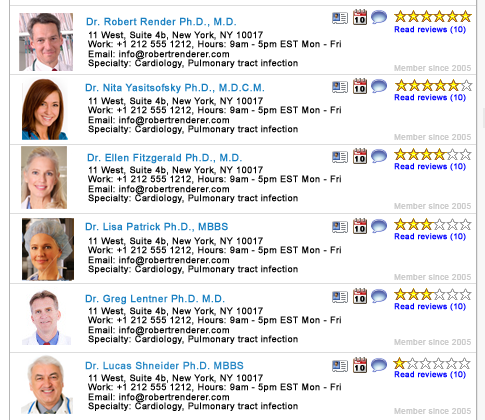
<style>
.page{position:relative;width:485px;height:420px;background:#ffffff}
.page>*{position:absolute;margin:0}
.t1{font:10px "ArialMT";letter-spacing:0.025em;color:#1b81c2;font-weight:bold}
.t2{font:8px "ArialMT";letter-spacing:0.025em;color:#0000ff;font-weight:bold}
.t3{font:9px/9.3px "ArialMT";letter-spacing:0.025em;color:#000000;font-weight:bold}
.t4{font:8px "ArialMT";letter-spacing:0.025em;color:#cccccc;font-weight:bold}
.t5{font:10px "ArialMT";letter-spacing:0.025em;color:#2a89c6;font-weight:bold}
</style>
<div class="page">
<p class="t1" style="left:86px;top:17px;width:150px;height:10px">Dr. Robert Render Ph.D., M.D.</p>
<p class="t2" style="left:394px;top:26px;width:72px;height:8px">Read reviews (10)</p>
<p class="t3" style="left:88px;top:31px;width:253px;height:37px">11 West, Suite 4b, New York, NY 10017<br>Work: +1 212 555 1212, Hours: 9am - 5pm EST Mon - Fri<br>Email: info@robertrenderer.com<br>Specialty: Cardiology, Pulmonary tract infection</p>
<p class="t4" style="left:394px;top:65px;width:77px;height:6px">Member since 2005</p>
<p class="t1" style="left:85px;top:83px;width:179px;height:11px">Dr. Nita Yasitsofsky Ph.D., M.D.C.M.</p>
<p class="t3" style="left:88px;top:97px;width:253px;height:37px">11 West, Suite 4b, New York, NY 10017<br>Work: +1 212 555 1212, Hours: 9am - 5pm EST Mon - Fri<br>Email: info@robertrenderer.com<br>Specialty: Cardiology, Pulmonary tract infection</p>
<p class="t2" style="left:394px;top:94px;width:72px;height:8px">Read reviews (10)</p>
<p class="t4" style="left:394px;top:134px;width:77px;height:6px">Member since 2005</p>
<p class="t1" style="left:87px;top:153px;width:155px;height:11px">Dr. Ellen Fitzgerald Ph.D., M.D.</p>
<p class="t3" style="left:88px;top:166px;width:253px;height:37px">11 West, Suite 4b, New York, NY 10017<br>Work: +1 212 555 1212, Hours: 9am - 5pm EST Mon - Fri<br>Email: info@robertrenderer.com<br>Specialty: Cardiology, Pulmonary tract infection</p>
<p class="t2" style="left:394px;top:163px;width:72px;height:8px">Read reviews (10)</p>
<p class="t4" style="left:394px;top:203px;width:77px;height:6px">Member since 2005</p>
<p class="t1" style="left:85px;top:222px;width:143px;height:10px">Dr. Lisa Patrick Ph.D., MBBS</p>
<p class="t2" style="left:394px;top:233px;width:72px;height:8px">Read reviews (10)</p>
<p class="t3" style="left:88px;top:237px;width:253px;height:37px">11 West, Suite 4b, New York, NY 10017<br>Work: +1 212 555 1212, Hours: 9am - 5pm EST Mon - Fri<br>Email: info@robertrenderer.com<br>Specialty: Cardiology, Pulmonary tract infection</p>
<p class="t4" style="left:394px;top:274px;width:77px;height:6px">Member since 2005</p>
<p class="t1" style="left:85px;top:294px;width:140px;height:11px">Dr. Greg Lentner Ph.D. M.D.</p>
<p class="t2" style="left:394px;top:303px;width:72px;height:8px">Read reviews (10)</p>
<p class="t3" style="left:88px;top:307px;width:253px;height:37px">11 West, Suite 4b, New York, NY 10017<br>Work: +1 212 555 1212, Hours: 9am - 5pm EST Mon - Fri<br>Email: info@robertrenderer.com<br>Specialty: Cardiology, Pulmonary tract infection</p>
<p class="t4" style="left:394px;top:339px;width:77px;height:6px">Member since 2005</p>
<p class="t5" style="left:85px;top:361px;width:159px;height:9px">Dr. Lucas Shneider Ph.D. MBBS</p>
<p class="t3" style="left:88px;top:374px;width:253px;height:37px">11 West, Suite 4b, New York, NY 10017<br>Work: +1 212 555 1212, Hours: 9am - 5pm EST Mon - Fri<br>Email: info@robertrenderer.com<br>Specialty: Cardiology, Pulmonary tract infection</p>
<p class="t2" style="left:394px;top:371px;width:72px;height:8px">Read reviews (10)</p>
<p class="t4" style="left:394px;top:408px;width:77px;height:6px">Member since 2005</p>
</div>
